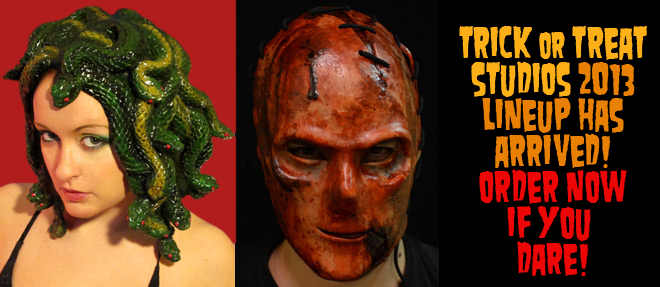
<style>
.page{position:relative;width:660px;height:287px;background:#000000}
.page>*{position:absolute;margin:0}
.t1{font:36px/36px "Danzig4p";letter-spacing:0.005em;color:#e78003}
.t2{font:36px/36px "Danzig4p";letter-spacing:0.005em;color:#fcaf17}
.t3{font:30px/36px "Danzig4p";letter-spacing:0.005em;color:#fcaf17}
.t4{font:36px/36px "Danzig4p";letter-spacing:0.005em;color:#ec0605}
</style>
<div class="page">
<p class="t1" style="left:459px;top:26px;width:188px;height:250px;text-align:center"><span class="t2">trick </span><span class="t3">or</span><span class="t2"> treat<br>studios</span> 2013<br>lineup has<br>arrived!<br><span class="t4">order now<br>if you <br>dare!</span></p>
</div>
